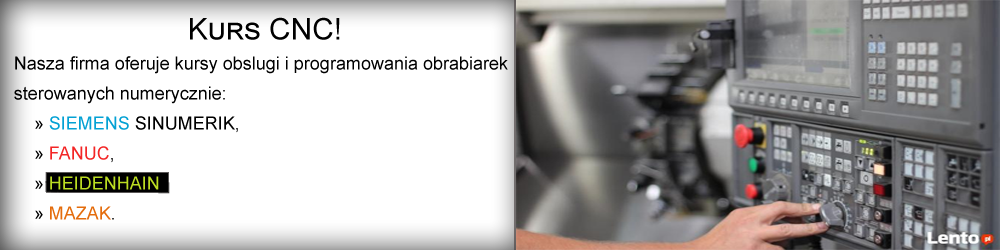
<style>
.page{position:relative;width:1000px;height:250px;background:#ffffff}
.page>*{position:absolute;margin:0}
.t1{font:18px/30px "ArialMT";color:#000000}
.t2{font:30px/24px "ArialMT";color:#000000;font-variant:small-caps}
.t3{font:18px/30px "ArialMT";color:#04a1d4}
.t4{font:18px/30px "ArialMT";color:#f32626}
.t5{font:18px/30px "ArialMT";color:#bcdd22}
.t6{font:18px/30px "ArialMT";color:#e46c0c}
</style>
<div class="page">
<p class="t1" style="left:14px;top:17px;width:494px;height:203px;text-align:center"><span class="t2">Kurs CNC!<br></span>Nasza firma oferuje kursy obslugi i programowania obrabiarek sterowanych numerycznie:<br>    » <span class="t3">SIEMENS</span> SINUMERIK,<br>    » <span class="t4">FANUC</span>,<br>    » <span class="t5">HEIDENHAIN</span>,<br>    » <span class="t6">MAZAK</span>.</p>
</div>
